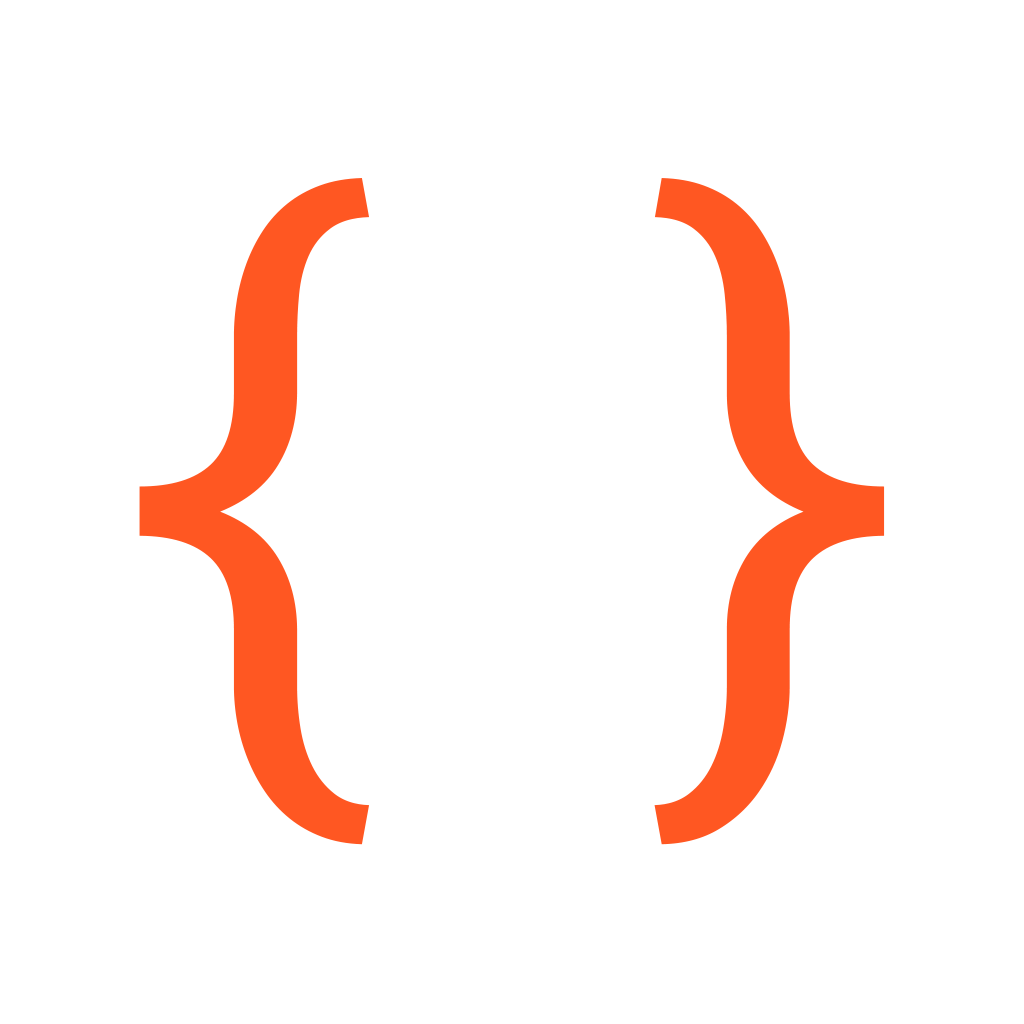
<style>
.page{position:relative;width:1024px;height:1024px;background:#ffffff}
.page>*{position:absolute;margin:0}
.t1{font:695px "RobotoMono-Regular";letter-spacing:0.14em;color:#ff5722}
</style>
<div class="page">
<p class="t1" style="left:139px;top:178px;width:746px;height:667px">{}</p>
</div>
